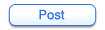
<style>
.page{position:relative;width:105px;height:30px;background:#ffffff}
.page>*{position:absolute;margin:0}
.t1{font:13px "Helvetica";color:#3372d7}
</style>
<div class="page">
<p class="t1" style="left:39px;top:9px;width:26px;height:11px">Post</p>
</div>
